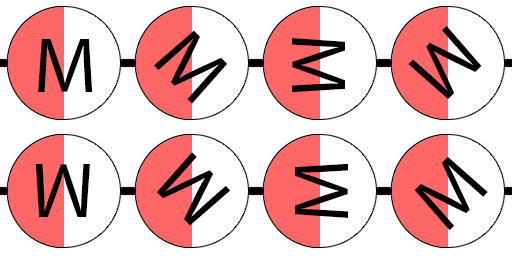
<style>
.page{position:relative;width:512px;height:256px;background:#ffffff}
.page>*{position:absolute;margin:0}
.t1{font:78.7px "MyriadPro-Regular";letter-spacing:0.1em;color:#000000}
</style>
<div class="page">
<p class="t1" style="left:153px;top:30px;width:75px;height:74px;rotate:45deg">M</p>
<p class="t1" style="left:408px;top:25px;width:74px;height:75px;rotate:135deg">M</p>
<p class="t1" style="left:38px;top:39px;width:55px;height:53px">M</p>
<p class="t1" style="left:292px;top:38px;width:53px;height:55px;rotate:90deg">M</p>
<p class="t1" style="left:156px;top:152px;width:75px;height:74px;rotate:-135deg">M</p>
<p class="t1" style="left:414px;top:156px;width:74px;height:75px;rotate:-45deg">M</p>
<p class="t1" style="left:35px;top:164px;width:55px;height:53px;rotate:180deg">M</p>
<p class="t1" style="left:295px;top:163px;width:53px;height:55px;rotate:-90deg">M</p>
</div>
